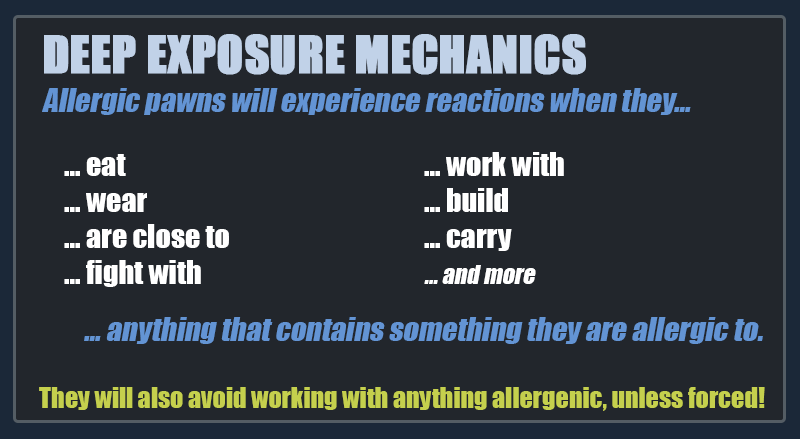
<style>
.page{position:relative;width:800px;height:439px;background:#22262c}
.page>*{position:absolute;margin:0}
.t1{font:47.5px "Impact";color:#c1d2e8;text-transform:uppercase;font-weight:bold}
.t2{font:30px "Impact";color:#6394d4;font-style:italic}
.t3{font:30px "Impact";color:#ffffff}
.t4{font:24px "Impact";color:#ffffff;font-style:italic}
.t5{font:26px "Impact";color:#c5d04d}
</style>
<div class="page">
<p class="t1" style="left:44px;top:34px;width:542px;height:41px">Deep exposure mechanics</p>
<p class="t2" style="left:42px;top:88px;width:649px;height:27px">Allergic pawns will experience reactions when they...</p>
<p class="t3" style="left:64px;top:152px;width:500px;height:135px">... eat         ... work with<br>... wear        ... build<br>... are close to      ... carry<br>... fight with       <span class="t4">... and more</span></p>
<p class="t2" style="left:84px;top:317px;width:679px;height:27px">... anything that contains something they are allergic to.</p>
<p class="t5" style="left:39px;top:387px;width:726px;height:24px">They will also avoid working with anything allergenic, unless forced!</p>
</div>
